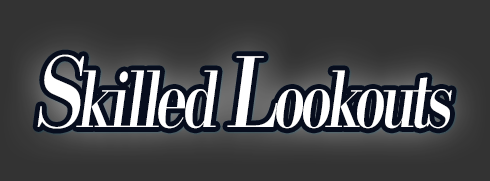
<style>
.page{position:relative;width:490px;height:181px;background:#333333}
.page>*{position:absolute;margin:0}
.t1{font:76.8px "KochoStd-Heavy";letter-spacing:-0.08em;color:#ffffff;font-style:italic;scale:0.75 1}
.t2{font:96px "KochoStd-Heavy";letter-spacing:-0.08em;color:#ffffff;font-style:italic;scale:0.75 1}
</style>
<div class="page">
<p class="t1" style="left:37px;top:54px;width:415px;height:75px"><span class="t2">S</span>killed <span class="t2">L</span>ookouts</p>
</div>
